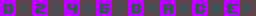
<style>
.page{position:relative;width:256px;height:16px;background:#5e454b}
.page>*{position:absolute;margin:0}
.t1{font:18px "UpheavalTT-BRK-";color:#395157;text-transform:uppercase}
</style>
<div class="page">
<p class="t1" style="left:3px;top:4px;width:10px;height:9px">0</p>
<p class="t1" style="left:35px;top:4px;width:10px;height:9px">2</p>
<p class="t1" style="left:51px;top:4px;width:10px;height:9px">3</p>
<p class="t1" style="left:67px;top:4px;width:10px;height:9px">4</p>
<p class="t1" style="left:83px;top:4px;width:10px;height:9px">5</p>
<p class="t1" style="left:99px;top:4px;width:10px;height:9px">6</p>
<p class="t1" style="left:115px;top:4px;width:10px;height:9px">7</p>
<p class="t1" style="left:131px;top:4px;width:10px;height:9px">8</p>
<p class="t1" style="left:147px;top:4px;width:10px;height:9px">9</p>
<p class="t1" style="left:163px;top:4px;width:10px;height:9px">a</p>
<p class="t1" style="left:179px;top:4px;width:10px;height:9px">b</p>
<p class="t1" style="left:195px;top:4px;width:10px;height:9px">c</p>
<p class="t1" style="left:211px;top:4px;width:10px;height:9px">d</p>
<p class="t1" style="left:227px;top:4px;width:10px;height:9px">e</p>
<p class="t1" style="left:243px;top:4px;width:10px;height:9px">f</p>
</div>
